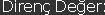
<style>
.page{position:relative;width:105px;height:15px;background:#333333}
.page>*{position:absolute;margin:0}
.t1{font:16px "Verdana";letter-spacing:-0.03em;color:#ffffff}
</style>
<div class="page">
<p class="t1" style="left:3px;top:0px;width:102px;height:15px">Direnç Değer:</p>
</div>
